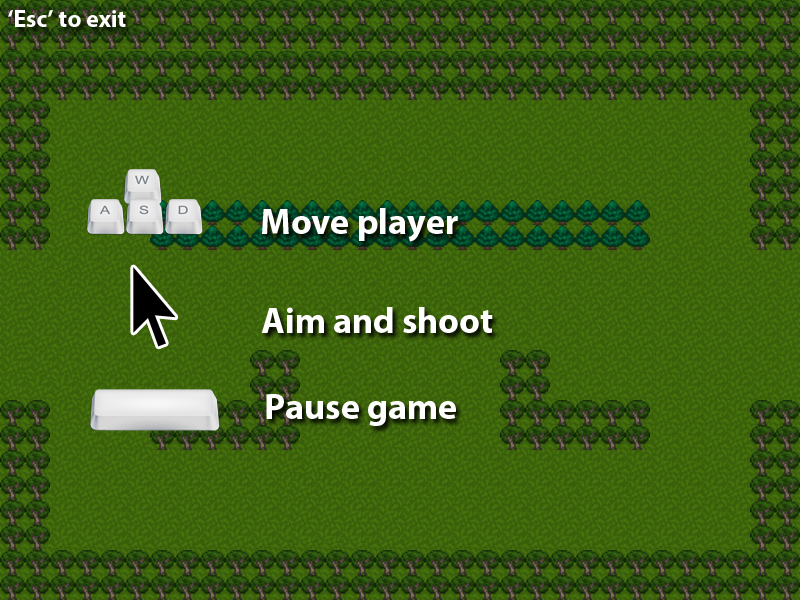
<style>
.page{position:relative;width:800px;height:600px}
.page>*{position:absolute;margin:0}
.t1{font:24px "MyriadPro-Bold";color:#ffffff}
.t2{font:36px "MyriadPro-Bold";color:#ffffff}
</style>
<div class="page">
<p class="t1" style="left:8px;top:10px;width:118px;height:17px">‘Esc’ to exit</p>
<p class="t2" style="left:262px;top:208px;width:196px;height:34px">Move player</p>
<p class="t2" style="left:261px;top:307px;width:232px;height:26px">Aim and shoot</p>
<p class="t2" style="left:266px;top:394px;width:190px;height:32px">Pause game</p>
</div>
